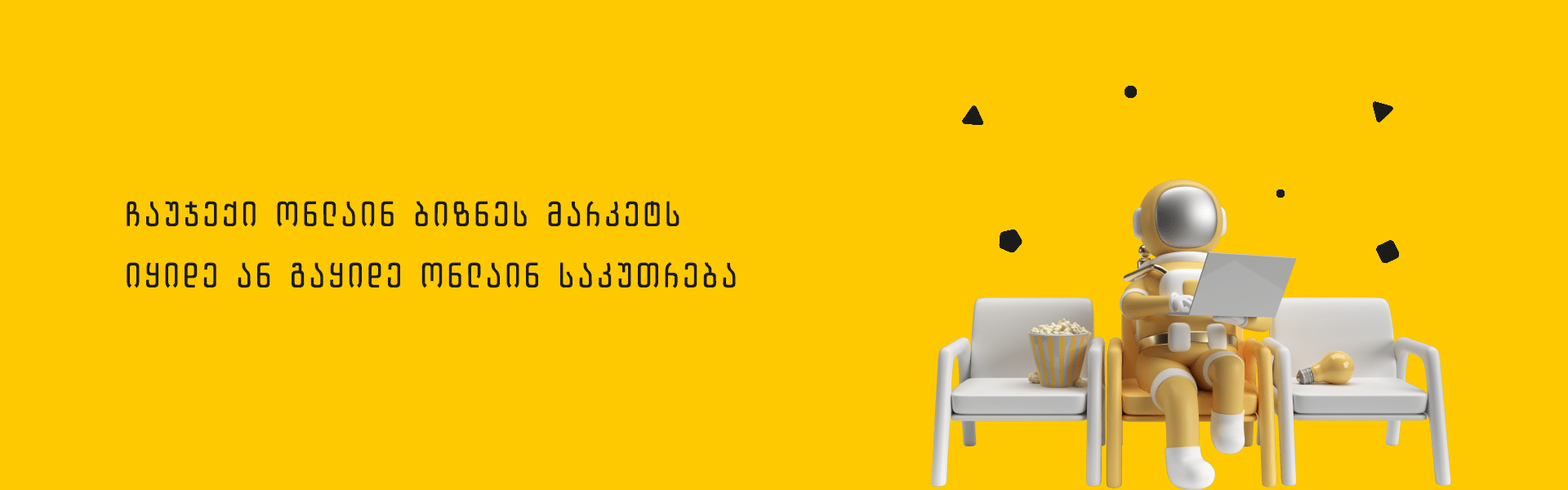
<style>
.page{position:relative;width:1568px;height:490px;background:#fec900}
.page>*{position:absolute;margin:0}
.t1{font:32.7px/20.4px "BPGTech05Caps";letter-spacing:0.12em;color:#1b1b1b;text-transform:uppercase}
</style>
<div class="page">
<p class="t1" style="left:127px;top:201px;width:609px;height:87px">ჩაუჯექი ონლაინ ბიზნეს მარკეტს<br><br><br>იყიდე ან გაყიდე ონლაინ საკუთრება</p>
</div>
